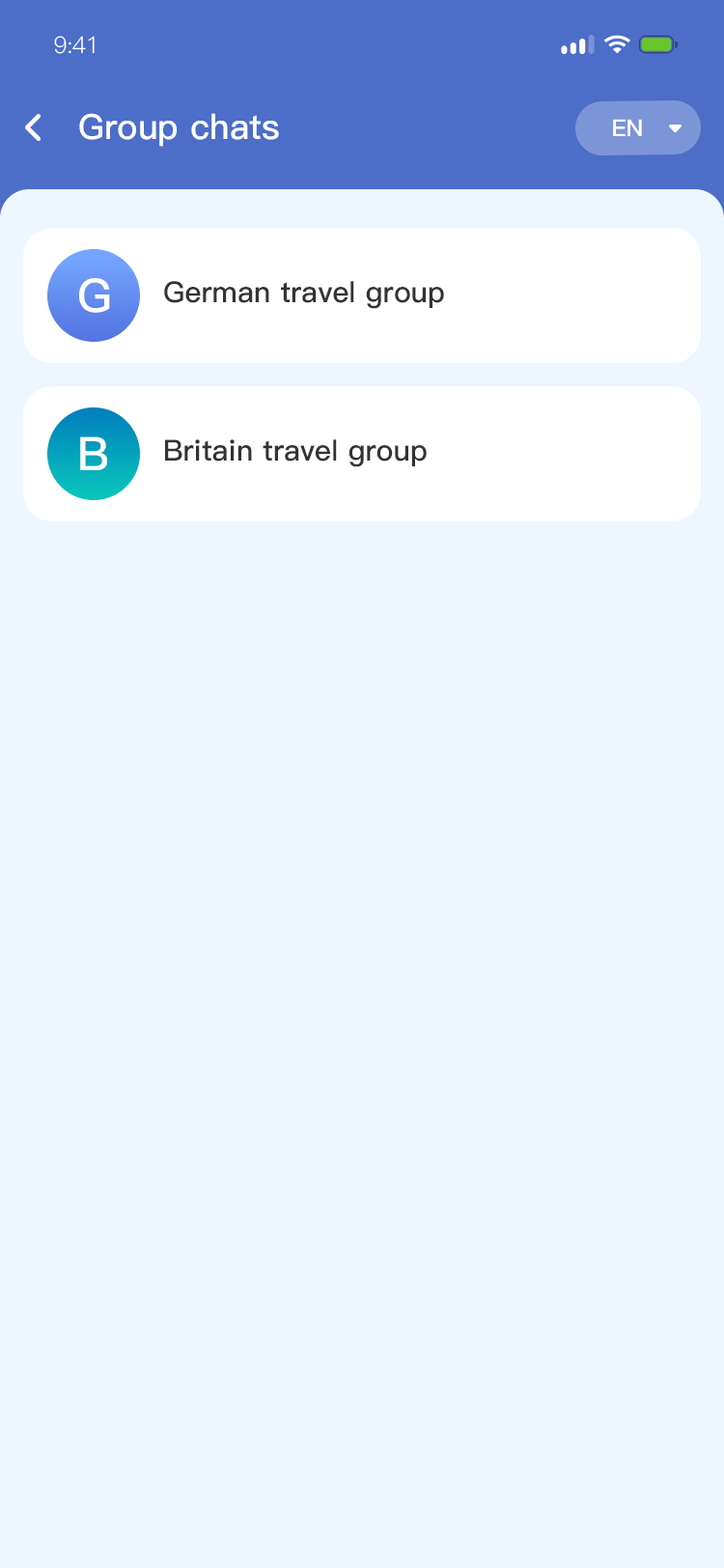
<style>
.page{position:relative;width:724px;height:1568px;background:#eef6ff}
.page>*{position:absolute;margin:0}
.t1{font:23.2px "PingFang-SC-Regular";letter-spacing:-0.025em;color:#ffffff}
.t2{font:34.8px "PingFang-SC-Bold";color:#ffffff}
.t3{font:34.8px "PingFang-SC-Bold";color:#ffffff;text-transform:uppercase}
.t4{font:23.2px "PingFang-SC-Bold";color:#ffffff}
.t5{font:46.3px "PingFang-SC-Bold";color:#ffffff}
.t6{font:29px "PingFang-SC-Bold";color:#333333}
</style>
<div class="page">
<p class="t1" style="left:54px;top:36px;width:41px;height:18px">9:41</p>
<p class="t2" style="left:79px;top:113px;width:200px;height:34px"><span class="t3">g</span>roup chats</p>
<p class="t4" style="left:613px;top:119px;width:29px;height:17px">EN</p>
<p class="t5" style="left:79px;top:278px;width:31px;height:35px">G</p>
<p class="t6" style="left:164px;top:281px;width:280px;height:28px">German travel group</p>
<p class="t5" style="left:80px;top:436px;width:27px;height:34px">B</p>
<p class="t6" style="left:165px;top:439px;width:262px;height:28px">Britain travel group</p>
</div>
